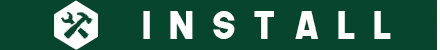
<style>
.page{position:relative;width:440px;height:50px;background:#08452e}
.page>*{position:absolute;margin:0}
.t1{font:37.5px "TheNextFont";letter-spacing:0.48em;color:#ffffff}
</style>
<div class="page">
<p class="t1" style="left:143px;top:11px;width:248px;height:28px">INSTALL</p>
</div>
